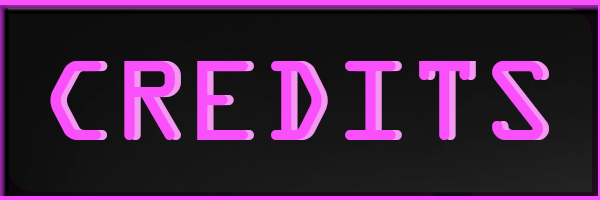
<style>
.page{position:relative;width:600px;height:200px}
.page>*{position:absolute;margin:0}
.t1{font:122px "OCRAExtended";color:#f950fb}
.t2{font:122px "OCRAExtended"}
</style>
<div class="page">
<p class="t1" style="left:50px;top:61px;width:493px;height:79px">CREDITS</p>
<p class="t2" style="left:56px;top:61px;width:493px;height:79px">CREDITS</p>
</div>
